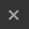
<style>
.page{position:relative;width:29px;height:29px;background:#333333}
.page>*{position:absolute;margin:0}
.t1{font:14px "Meiryo";letter-spacing:-0.1em;color:#a4a4a4}
</style>
<div class="page">
<p class="t1" style="left:8px;top:10px;width:11px;height:10px">✖</p>
</div>
